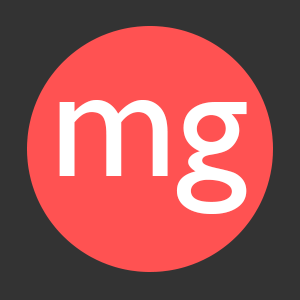
<style>
.page{position:relative;width:300px;height:300px;background:#333333}
.page>*{position:absolute;margin:0}
.t1{font:165.2px "GillSans";color:#ffffff}
</style>
<div class="page">
<p class="t1" style="left:59px;top:100px;width:188px;height:114px">mg</p>
</div>
